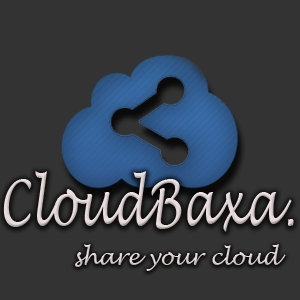
<style>
.page{position:relative;width:300px;height:300px;background:#333333}
.page>*{position:absolute;margin:0}
.t1{font:64px "LucidaHandwriting-Italic";color:#e3d8d8;scale:0.69 1}
.t2{font:23.2px "LucidaHandwriting-Italic";color:#cecece;scale:0.93 1}
</style>
<div class="page">
<p class="t1" style="left:3px;top:171px;width:291px;height:61px">CloudBaxa.</p>
<p class="t2" style="left:75px;top:244px;width:211px;height:27px">share your cloud</p>
</div>
